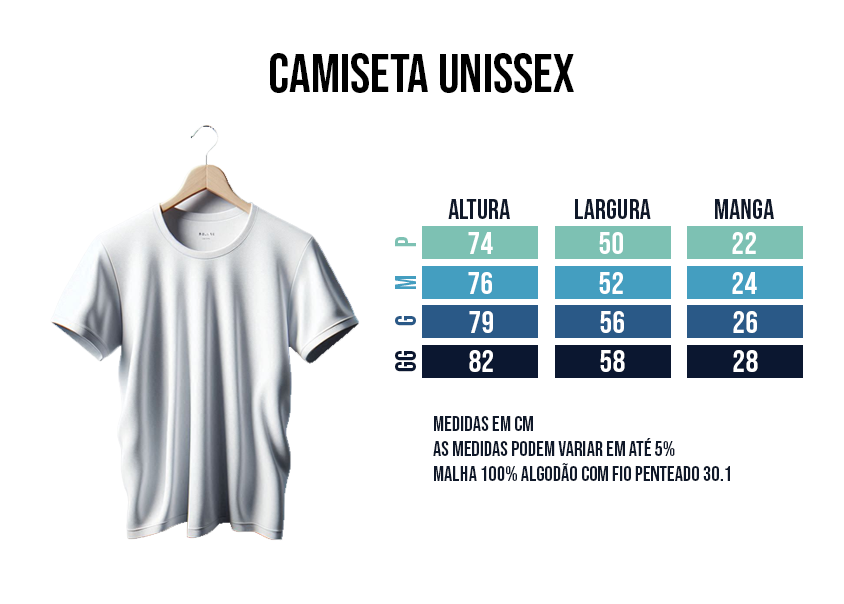
<style>
.page{position:relative;width:844px;height:604px;background:#ffffff}
.page>*{position:absolute;margin:0}
.t1{font:54.1px "BebasNeue-Regular";color:#000000}
.t2{font:28px "BebasNeue-Regular";color:#0f1829}
.t3{font:31.6px "BebasNeue-Regular";color:#ffffff}
.t4{font:29.3px "BebasNeue-Regular";color:#7dc1b3}
.t5{font:29.3px "BebasNeue-Regular";color:#449ec0}
.t6{font:29.3px "BebasNeue-Regular";color:#2a5987}
.t7{font:29.3px "BebasNeue-Regular";color:#0b1730}
.t8{font:20.8px "BebasNeue-Regular";color:#0f1829}
</style>
<div class="page">
<p class="t1" style="left:270px;top:53px;width:304px;height:40px">camiseta unissex</p>
<p class="t2" style="left:448px;top:199px;width:62px;height:20px">altura</p>
<p class="t2" style="left:575px;top:199px;width:76px;height:20px">largura</p>
<p class="t2" style="left:715px;top:199px;width:59px;height:20px">manga</p>
<p class="t3" style="left:468px;top:232px;width:25px;height:22px">74</p>
<p class="t3" style="left:599px;top:232px;width:24px;height:22px">50</p>
<p class="t3" style="left:732px;top:232px;width:24px;height:22px">22</p>
<p class="t4" style="left:395px;top:237px;width:21px;height:10px;rotate:-90deg">p</p>
<p class="t5" style="left:395px;top:276px;width:21px;height:13px;rotate:-90deg">m</p>
<p class="t3" style="left:468px;top:272px;width:24px;height:22px">76</p>
<p class="t3" style="left:599px;top:272px;width:24px;height:22px">52</p>
<p class="t3" style="left:732px;top:272px;width:25px;height:22px">24</p>
<p class="t6" style="left:395px;top:316px;width:21px;height:10px;rotate:-90deg">g</p>
<p class="t3" style="left:469px;top:311px;width:24px;height:22px">79</p>
<p class="t3" style="left:600px;top:311px;width:24px;height:22px">56</p>
<p class="t3" style="left:733px;top:311px;width:24px;height:22px">26</p>
<p class="t7" style="left:395px;top:351px;width:21px;height:21px;rotate:-90deg">gg</p>
<p class="t3" style="left:469px;top:350px;width:24px;height:22px">82</p>
<p class="t3" style="left:600px;top:350px;width:25px;height:22px">58</p>
<p class="t3" style="left:733px;top:350px;width:25px;height:22px">28</p>
<p class="t8" style="left:433px;top:416px;width:297px;height:65px">medidas em cm<br>as medidas podem variar em até 5%<br>malha 100% algodão com fio penteado 30.1</p>
</div>
